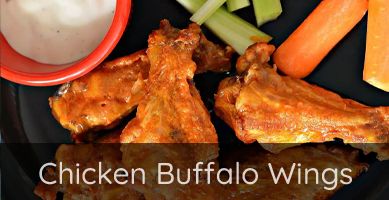
<style>
.page{position:relative;width:389px;height:200px}
.page>*{position:absolute;margin:0}
.t1{font:30px "Quicksand-Medium";color:#dcd4ce}
</style>
<div class="page">
<p class="t1" style="left:39px;top:161px;width:313px;height:29px">Chicken Buffalo Wings</p>
</div>
